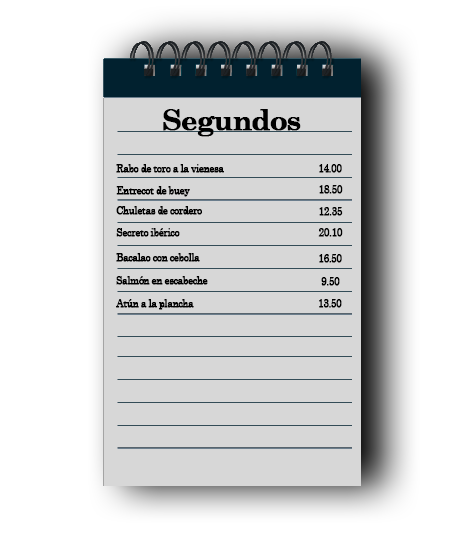
<style>
.page{position:relative;width:468px;height:534px;background:#d7d7d7}
.page>*{position:absolute;margin:0}
.t1{font:29px "CenturySchoolbook-Bold";letter-spacing:-0.06em;color:#000000;font-weight:bold}
.t2{font:10px "CenturySchoolbook";letter-spacing:-0.06em;color:#000000;font-weight:bold}
</style>
<div class="page">
<p class="t1" style="left:163px;top:109px;width:138px;height:28px">Segundos</p>
<p class="t2" style="left:116px;top:164px;width:108px;height:9px">Rabo de toro a la vienesa</p>
<p class="t2" style="left:319px;top:164px;width:23px;height:9px">14.00</p>
<p class="t2" style="left:319px;top:185px;width:24px;height:9px">18.50</p>
<p class="t2" style="left:116px;top:186px;width:74px;height:11px">Entrecot de buey</p>
<p class="t2" style="left:116px;top:206px;width:86px;height:9px">Chuletas de cordero</p>
<p class="t2" style="left:319px;top:207px;width:24px;height:9px">12.35</p>
<p class="t2" style="left:116px;top:228px;width:64px;height:9px">Secreto ibérico</p>
<p class="t2" style="left:318px;top:228px;width:25px;height:9px">20.10</p>
<p class="t2" style="left:116px;top:253px;width:84px;height:9px">Bacalao con cebolla</p>
<p class="t2" style="left:319px;top:254px;width:23px;height:9px">16.50</p>
<p class="t2" style="left:116px;top:276px;width:92px;height:9px">Salmón en escabeche</p>
<p class="t2" style="left:321px;top:277px;width:19px;height:9px">9.50</p>
<p class="t2" style="left:116px;top:299px;width:78px;height:11px">Atún a la plancha</p>
<p class="t2" style="left:319px;top:299px;width:23px;height:9px">13.50</p>
</div>
